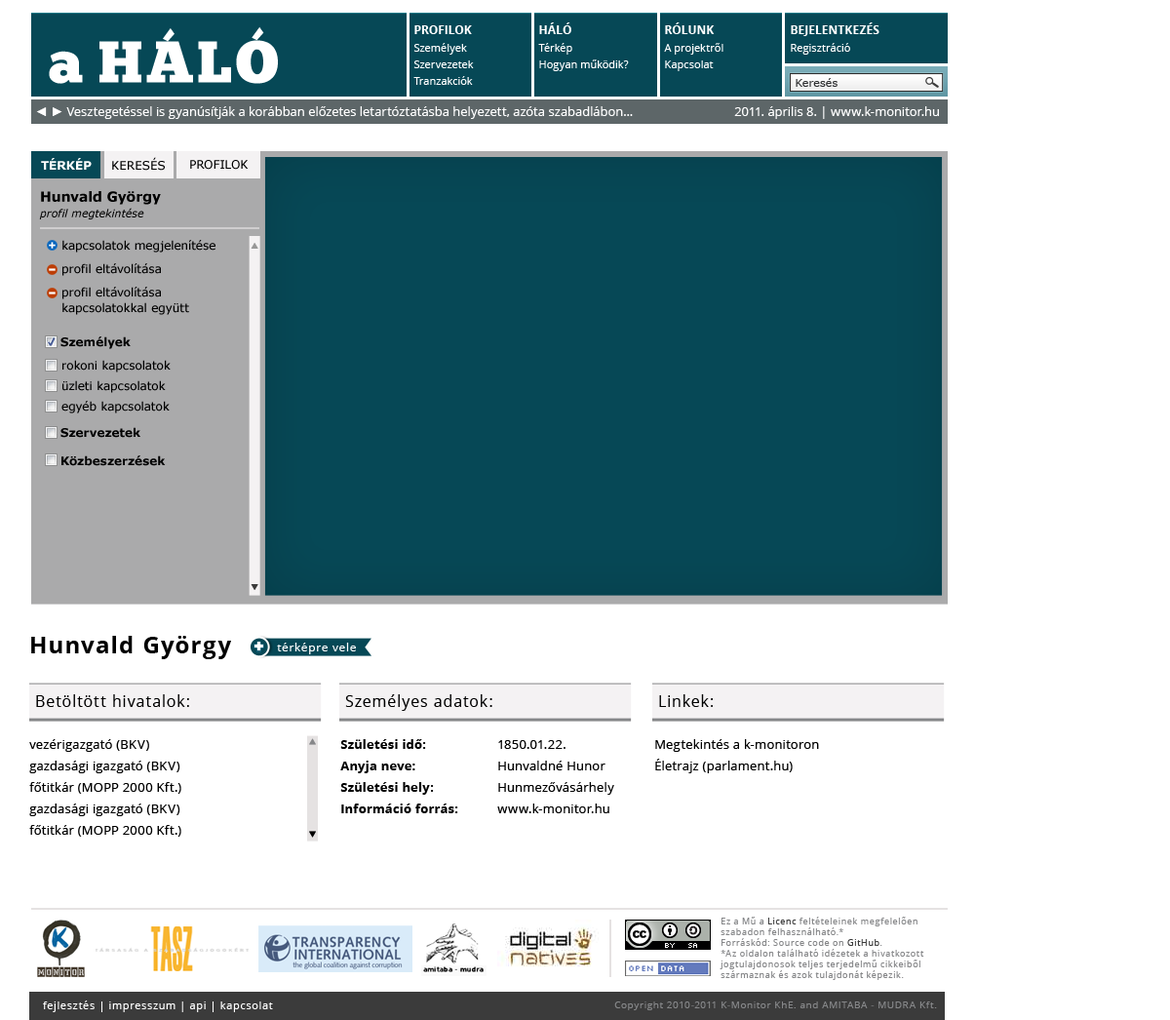
<style>
.page{position:relative;width:1170px;height:1020px;background:#ffffff}
.page>*{position:absolute;margin:0}
.t1{font:58.5px "ChunkFive-Roman";letter-spacing:0.05em;color:#ffffff;text-transform:uppercase}
.t2{font:58.5px "ChunkFive-Roman";letter-spacing:0.05em;color:#ffffff}
.t3{font:11.7px "OpenSans-Bold";color:#ffffff;text-transform:uppercase}
.t4{font:11.7px/17.5px "OpenSans-Bold";color:#ffffff;text-transform:uppercase}
.t5{font:10.7px/17.5px "OpenSans";color:#ffffff}
.t6{font:10.7px/16.6px "OpenSans";color:#ffffff}
.t7{font:10.7px "Verdana";color:#2f3032}
.t8{font:12.7px "OpenSans";color:#ffffff}
.t9{font:12.7px "ArialMT";color:#ffffff}
.t10{font:11.7px "Verdana-Bold";color:#ffffff;text-transform:uppercase}
.t11{font:11.7px "Verdana";color:#000000;text-transform:uppercase}
.t12{font:10.7px/15.6px "Verdana-Italic";color:#000000}
.t13{font:13.6px/15.6px "Verdana-Bold";color:#000000}
.t14{font:11.7px "Verdana";color:#000000}
.t15{font:11.7px/15.6px "Verdana";color:#000000}
.t16{font:11.7px "Verdana-Bold";color:#000000}
.t17{font:23.4px "OpenSans-Bold";letter-spacing:0.06em;color:#000000}
.t18{font:11.7px "OpenSans";letter-spacing:0.06em;color:#ffffff}
.t19{font:15.6px "OpenSans";letter-spacing:0.06em;color:#000000}
.t20{font:12.7px/21.4px "OpenSans";letter-spacing:0.02em;color:#000000}
.t21{font:12.7px/21.4px "OpenSans-Bold";letter-spacing:0.02em;color:#000000}
.t22{font:8.8px/10.7px "OpenSans";letter-spacing:0.06em;color:#868789}
.t23{font:8.8px/10.7px "OpenSans";letter-spacing:0.06em;color:#3b3b3b}
.t24{font:10.7px "OpenSans";letter-spacing:0.06em;color:#ffffff}
.t25{font:9.7px "OpenSans";letter-spacing:0.06em;color:#868789}
</style>
<div class="page">
<p class="t1" style="left:49px;top:26px;width:229px;height:58px"><span class="t2">a </span>háló</p>
<p class="t3" style="left:414px;top:25px;width:58px;height:9px">Profilok</p>
<p class="t3" style="left:539px;top:22px;width:32px;height:12px">háló</p>
<p class="t3" style="left:665px;top:22px;width:49px;height:12px">Rólunk</p>
<p class="t4" style="left:790px;top:22px;width:89px;height:33px">Bejelentkezés<br><span class="t5">Regisztráció</span></p>
<p class="t6" style="left:413px;top:43px;width:61px;height:42px">Személyek<br>Szervezetek<br>Tranzakciók</p>
<p class="t6" style="left:538px;top:43px;width:91px;height:28px">Térkép<br>Hogyan működik?</p>
<p class="t6" style="left:664px;top:43px;width:59px;height:28px">A projektről<br>Kapcsolat</p>
<p class="t7" style="left:795px;top:78px;width:42px;height:9px">Keresés</p>
<p class="t8" style="left:36px;top:106px;width:597px;height:13px"><span class="t9">◄ ► </span>Vesztegetéssel is gyanúsítják a korábban előzetes letartóztatásba helyezett, azóta szabadlábon...</p>
<p class="t8" style="left:734px;top:106px;width:205px;height:13px">2011. április 8. | www.k-monitor.hu</p>
<p class="t10" style="left:41px;top:158px;width:51px;height:12px">térkép</p>
<p class="t11" style="left:112px;top:157px;width:53px;height:14px">keresés</p>
<p class="t11" style="left:190px;top:160px;width:59px;height:10px">profilok</p>
<p class="t12" style="left:39px;top:191px;width:122px;height:28px"><span class="t13">Hunvald György<br></span>profil megtekintése</p>
<p class="t14" style="left:62px;top:240px;width:153px;height:12px">kapcsolatok megjelenítése</p>
<p class="t14" style="left:62px;top:263px;width:99px;height:13px">profil eltávolítása</p>
<p class="t15" style="left:62px;top:287px;width:127px;height:28px">profil eltávolítása <br>kapcsolatokkal együtt</p>
<p class="t16" style="left:60px;top:336px;width:71px;height:13px">Személyek</p>
<p class="t14" style="left:62px;top:360px;width:109px;height:12px">rokoni kapcsolatok</p>
<p class="t14" style="left:62px;top:380px;width:104px;height:13px">üzleti kapcsolatok</p>
<p class="t14" style="left:61px;top:401px;width:109px;height:12px">egyéb kapcsolatok</p>
<p class="t16" style="left:60px;top:427px;width:80px;height:11px">Szervezetek</p>
<p class="t16" style="left:61px;top:455px;width:105px;height:11px">Közbeszerzések</p>
<p class="t17" style="left:31px;top:635px;width:200px;height:24px">Hunvald György</p>
<p class="t18" style="left:277px;top:642px;width:79px;height:12px">térképre vele</p>
<p class="t19" style="left:36px;top:694px;width:153px;height:13px">Betöltött hivatalok:</p>
<p class="t19" style="left:345px;top:694px;width:147px;height:17px">Személyes adatok:</p>
<p class="t19" style="left:659px;top:694px;width:53px;height:13px">Linkek:</p>
<p class="t20" style="left:29px;top:739px;width:152px;height:97px">vezérigazgató (BKV)<br>gazdasági igazgató (BKV)<br>főtitkár (MOPP 2000 Kft.)<br>gazdasági igazgató (BKV)<br>főtitkár (MOPP 2000 Kft.)</p>
<p class="t21" style="left:340px;top:739px;width:118px;height:74px">Születési idő:  <br>Anyja neve: <br>Születési hely:<br>Információ forrás:</p>
<p class="t20" style="left:497px;top:740px;width:117px;height:73px">1850.01.22.<br>Hunvaldné Hunor<br>Hunmezővásárhely<br>www.k-monitor.hu</p>
<p class="t20" style="left:655px;top:739px;width:164px;height:34px">Megtekintés a k-monitoron<br>Életrajz (parlament.hu)</p>
<p class="t22" style="left:719px;top:916px;width:205px;height:64px">Ez a Mű a <span class="t23">Licenc </span>feltételeinek megfelelően szabadon felhasználható.*<br>Forráskód: Source code on <span class="t23">GitHub</span>.<br>*Az oldalon található idézetek a hivatkozott jogtulajdonosok teljes terjedelmű cikkeiből származnak és azok tulajdonát képezik.</p>
<p class="t24" style="left:43px;top:1000px;width:230px;height:12px">fejlesztés | impresszum | api | kapcsolat</p>
<p class="t25" style="left:614px;top:1001px;width:323px;height:9px">Copyright 2010-2011 K-Monitor KhE. and AMITABA - MUDRA Kft.</p>
</div>
